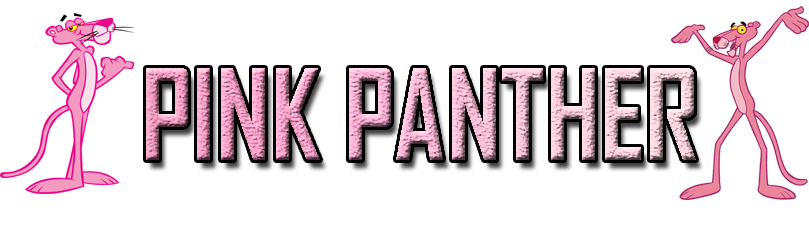
<style>
.page{position:relative;width:809px;height:250px;background:#ffffff}
.page>*{position:absolute;margin:0}
.t1{font:120.1px "AgencyFB-Bold";scale:0.95 1}
</style>
<div class="page">
<p class="t1" style="left:146px;top:68px;width:550px;height:92px">PINK PANTHER</p>
</div>
